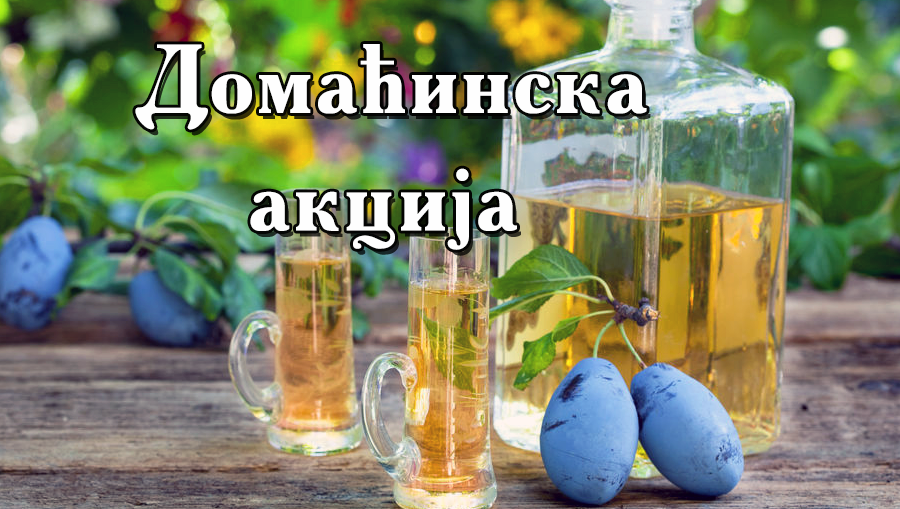
<style>
.page{position:relative;width:900px;height:509px}
.page>*{position:absolute;margin:0}
.t1{font:98px "AkademieAlte";color:#fefefe}
</style>
<div class="page">
<p class="t1" style="left:135px;top:44px;width:512px;height:206px;text-align:center">Домаћинска<br> акција</p>
</div>
